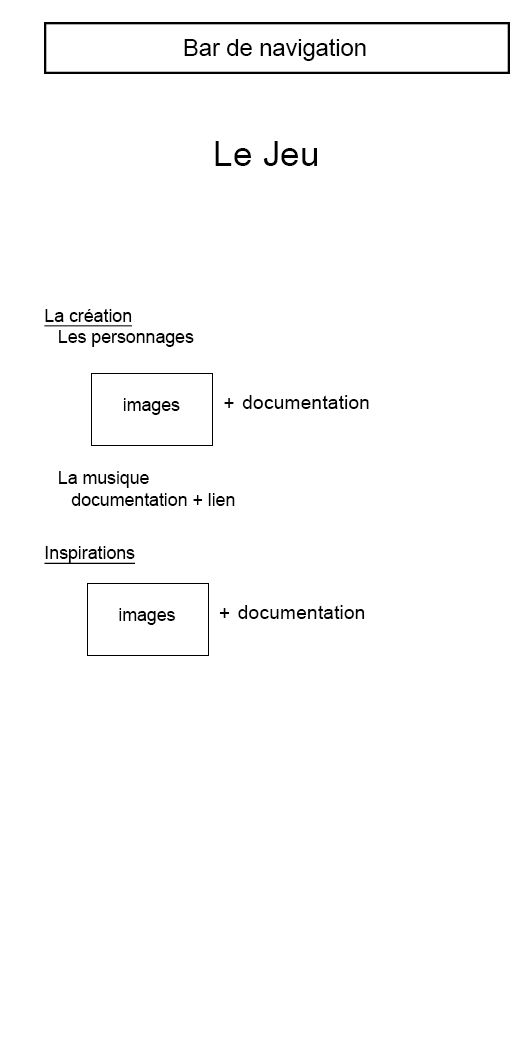
<style>
.page{position:relative;width:531px;height:1063px;background:#ffffff}
.page>*{position:absolute;margin:0}
.t1{font:23.6px "ArialMT";color:#000000}
.t2{font:35.4px "ArialMT";color:#000000}
.t3{font:17.7px "ArialMT";color:#000000}
.t4{font:17.7px "ArialMT";color:#000000;text-decoration:underline}
.t5{font:19.5px "ArialMT";color:#000000}
</style>
<div class="page">
<p class="t1" style="left:184px;top:38px;width:182px;height:23px">Bar de navigation</p>
<p class="t2" style="left:215px;top:141px;width:102px;height:25px">Le Jeu</p>
<p class="t3" style="left:44px;top:309px;width:150px;height:38px"><span class="t4">La création<br></span> Les personnages</p>
<p class="t3" style="left:123px;top:398px;width:57px;height:17px">images</p>
<p class="t5" style="left:224px;top:395px;width:145px;height:14px">documentation</p>
<p class="t3" style="left:59px;top:471px;width:176px;height:35px">La musique<br> documentation + lien</p>
<p class="t4" style="left:44px;top:546px;width:91px;height:18px">Inspirations</p>
<p class="t5" style="left:219px;top:605px;width:146px;height:14px">documentation</p>
<p class="t3" style="left:119px;top:608px;width:56px;height:17px">images</p>
</div>
